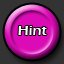
<style>
.page{position:relative;width:64px;height:64px;background:#333333}
.page>*{position:absolute;margin:0}
.t1{font:14px "ErasITC-Demi";color:#ffffff}
</style>
<div class="page">
<p class="t1" style="left:18px;top:26px;width:29px;height:9px">Hint</p>
</div>
